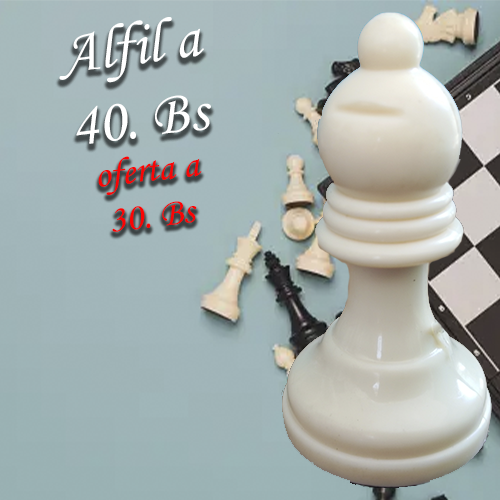
<style>
.page{position:relative;width:500px;height:500px}
.page>*{position:absolute;margin:0}
.t1{font:61.3px "MonotypeCorsiva";color:#ffffff}
.t2{font:38.2px "MonotypeCorsiva";color:#fb0404}
</style>
<div class="page">
<p class="t1" style="left:59px;top:17px;width:152px;height:127px;text-align:center;rotate:-7deg">Alfil a<br>40. Bs</p>
<p class="t2" style="left:98px;top:156px;width:104px;height:76px;text-align:center;rotate:-7deg">oferta a<br>30. Bs</p>
</div>
